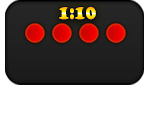
<style>
.page{position:relative;width:149px;height:120px;background:#ffffff}
.page>*{position:absolute;margin:0}
.t1{font:21.6px "UTM-Cooper-Black";scale:0.83 1}
</style>
<div class="page">
<p class="t1" style="left:59px;top:6px;width:37px;height:14px">1:10</p>
</div>
